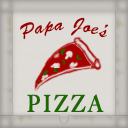
<style>
.page{position:relative;width:128px;height:128px}
.page>*{position:absolute;margin:0}
.t1{font:19.9px "BrushScriptStd";letter-spacing:0.05em;color:#990000;scale:0.84 1}
.t2{font:19.9px "BrushScriptStd";letter-spacing:-0.17em;color:#990000;scale:0.84 1}
.t3{font:23px "BigCaslon-Medium";letter-spacing:0.13em;color:#1b6900;font-weight:bold;scale:0.87 1}
</style>
<div class="page">
<p class="t1" style="left:20px;top:17px;width:89px;height:23px">Papa Joe<span class="t2">’</span>s</p>
<p class="t3" style="left:27px;top:94px;width:77px;height:18px">PIZZA</p>
</div>
